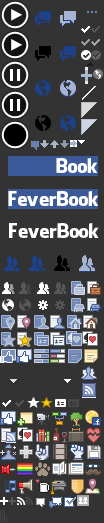
<style>
.page{position:relative;width:104px;height:523px;background:#333333}
.page>*{position:absolute;margin:0}
.t1{font:19px "FacebookLetterFaces";color:#ffffff}
</style>
<div class="page">
<p class="t1" style="left:56px;top:158px;width:42px;height:15px">Book</p>
<p class="t1" style="left:8px;top:191px;width:91px;height:15px">FeverBook</p>
<p class="t1" style="left:9px;top:223px;width:90px;height:15px">FeverBook</p>
</div>
